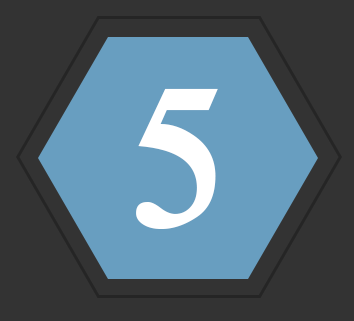
<style>
.page{position:relative;width:354px;height:321px;background:#333333}
.page>*{position:absolute;margin:0}
.t1{font:280px "Rod";color:#ffffff}
</style>
<div class="page">
<p class="t1" style="left:136px;top:88px;width:82px;height:141px">5</p>
</div>
